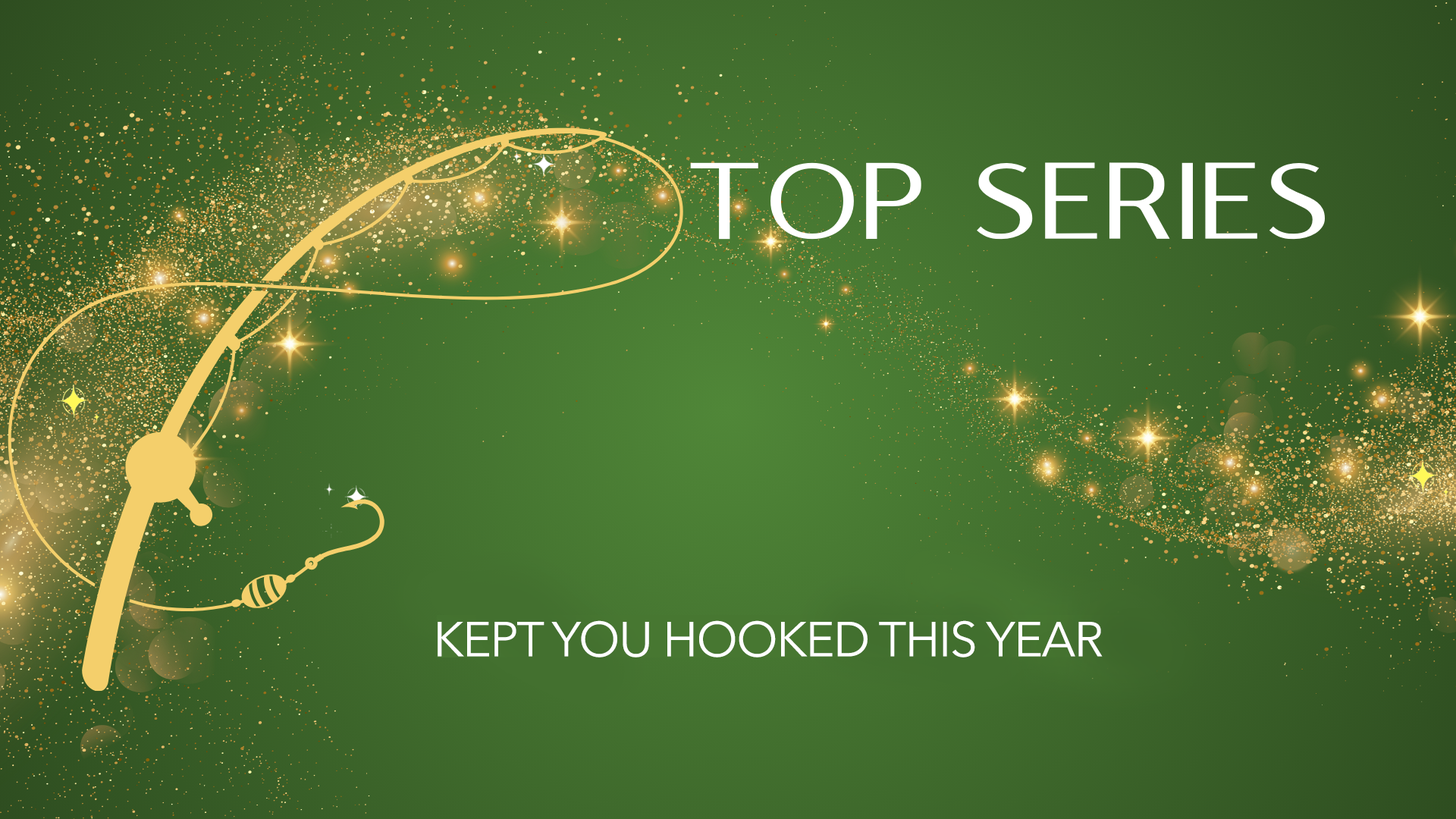
<style>
.page{position:relative;width:1456px;height:819px}
.page>*{position:absolute;margin:0}
.t1{font:48.5px "AvenirNext-Regular";letter-spacing:-0.025em;color:#ffffff}
</style>
<div class="page">
<p class="t1" style="left:438px;top:620px;width:665px;height:37px">KEPT YOU HOOKED THIS YEAR</p>
</div>
